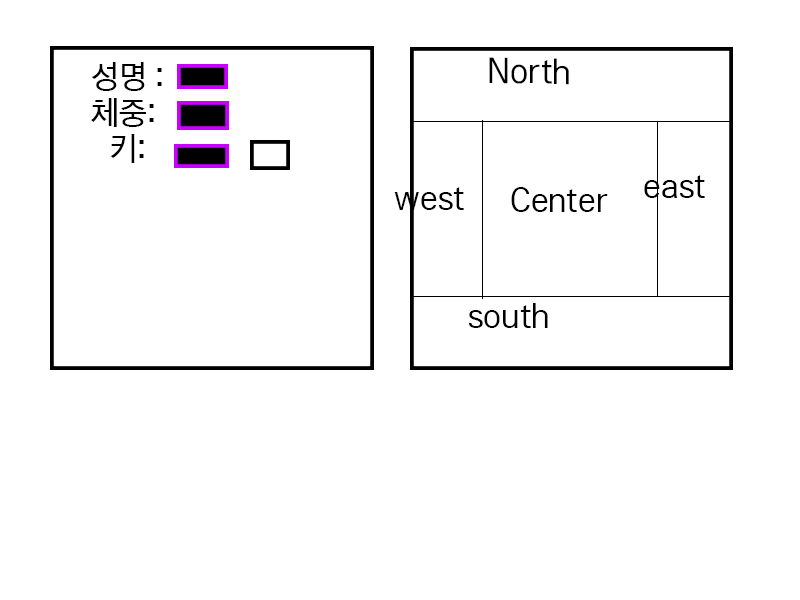
<style>
.page{position:relative;width:800px;height:600px;background:#ffffff}
.page>*{position:absolute;margin:0}
.t1{font:36px/36px "LGPC";color:#000000}
.t2{font:36px "LGPC";color:#000000}
</style>
<div class="page">
<p class="t1" style="left:91px;top:62px;width:71px;height:101px;text-align:center">성명 :<br>체중: <br>키:</p>
<p class="t2" style="left:489px;top:57px;width:80px;height:28px;rotate:1deg">North</p>
<p class="t2" style="left:644px;top:175px;width:61px;height:23px">east</p>
<p class="t2" style="left:394px;top:187px;width:70px;height:23px">west</p>
<p class="t2" style="left:511px;top:187px;width:97px;height:25px">Center</p>
<p class="t2" style="left:468px;top:303px;width:80px;height:25px">south</p>
</div>
